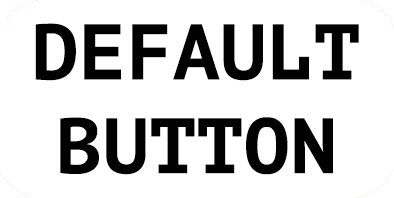
<style>
.page{position:relative;width:394px;height:198px;background:#ffffff}
.page>*{position:absolute;margin:0}
.t1{font:78.2px "PTMono-Bold";color:#000000}
</style>
<div class="page">
<p class="t1" style="left:35px;top:23px;width:324px;height:152px;text-align:center">DEFAULT<br>BUTTON</p>
</div>
